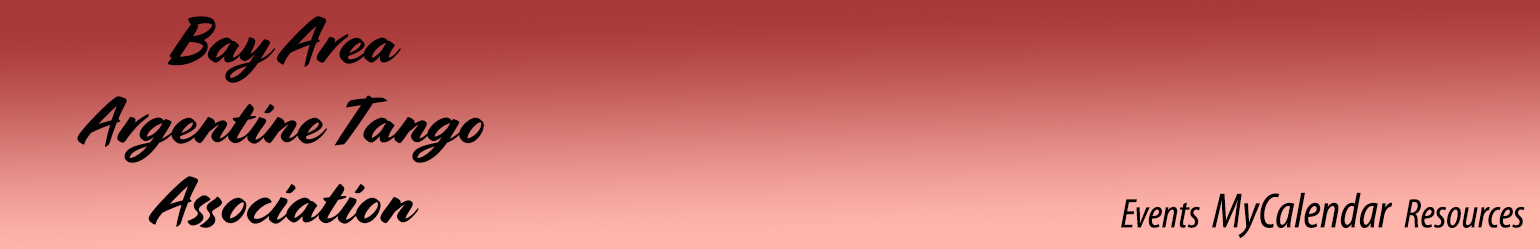
<style>
.page{position:relative;width:1540px;height:249px}
.page>*{position:absolute;margin:0}
.t1{font:66.7px "Cortado";color:#020202}
.t2{font:50px "MyriadPro-CondIt";color:#020202}
.t3{font:41.7px "MyriadPro-CondIt";color:#020202}
</style>
<div class="page">
<p class="t1" style="left:77px;top:16px;width:407px;height:212px;text-align:center">Bay Area<br>Argentine Tango<br>Association</p>
<p class="t2" style="left:1121px;top:192px;width:404px;height:47px"><span class="t3">Events  </span>MyCalendar <span class="t3"> Resources</span></p>
</div>
